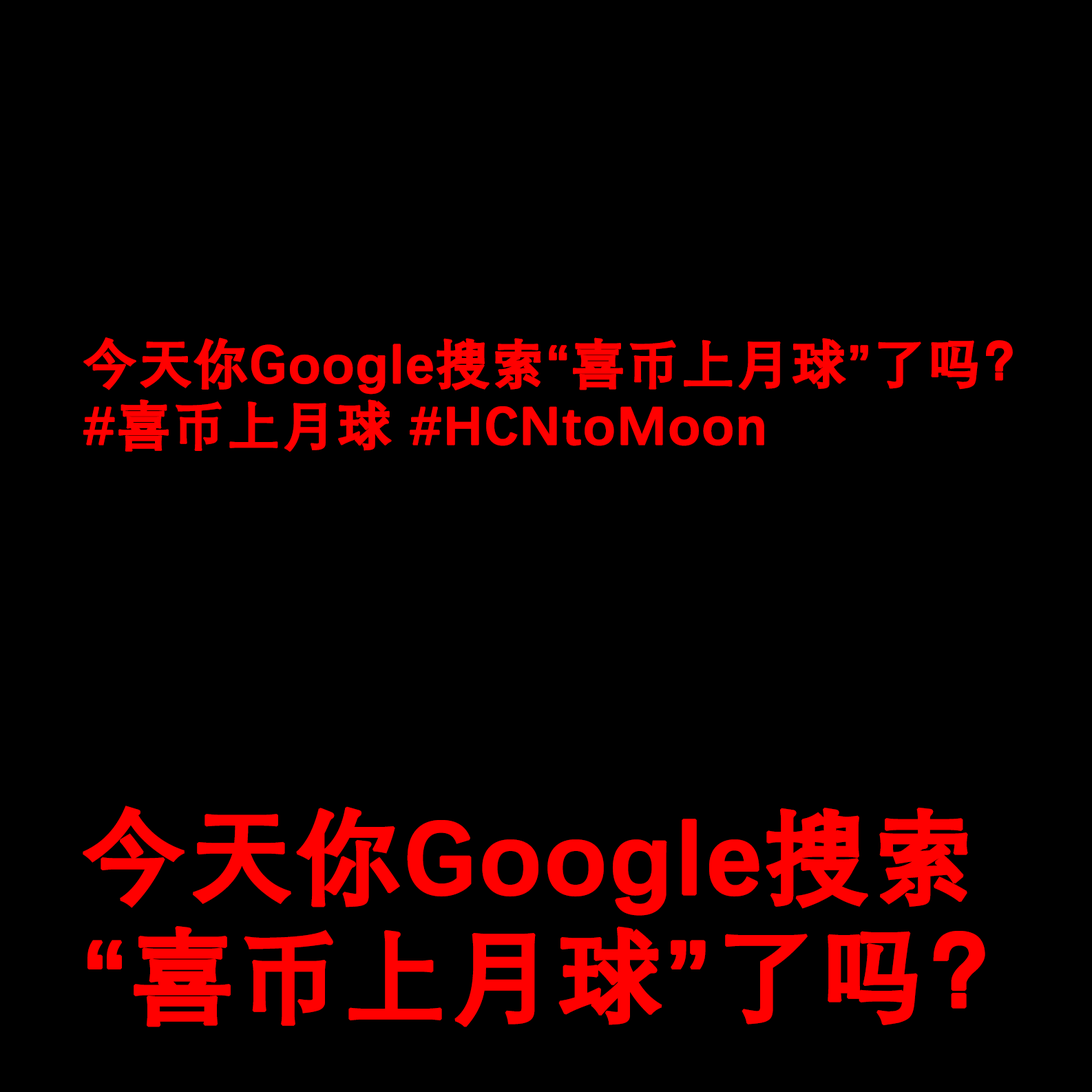
<style>
.page{position:relative;width:1092px;height:1092px;background:#000000}
.page>*{position:absolute;margin:0}
.t1{font:53.6px/61.5px "DengXian-Bold";letter-spacing:0.005em;color:#ff0000;font-weight:bold}
.t2{font:103.7px/119.2px "DengXian-Bold";letter-spacing:0.005em;color:#ff0000;font-weight:bold}
</style>
<div class="page">
<p class="t1" style="left:83px;top:337px;width:930px;height:115px">今天你Google搜索“喜币上月球”了吗？<br>#喜币上月球 #HCNtoMoon</p>
<p class="t2" style="left:83px;top:806px;width:902px;height:221px">今天你Google搜索<br>“喜币上月球”了吗？</p>
</div>
